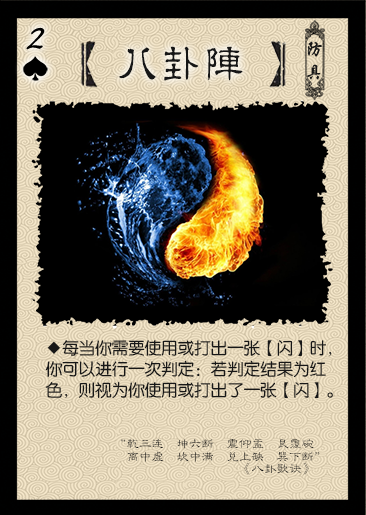
<style>
.page{position:relative;width:366px;height:515px;background:#000000}
.page>*{position:absolute;margin:0}
.t1{font:39.2px "Jxixinkai";letter-spacing:0.22em;color:#000000;font-weight:bold;font-style:italic}
.t2{font:41.7px "¾­µä·±½ÇÁ¥ Regular";letter-spacing:0.05em;color:#161616}
.t3{font:16.7px/20.9px "FZY3JW--GB1-0";letter-spacing:-0.01em;color:#171717}
.t4{font:12.5px/12.5px "FZLBJW--GB1-0";color:#171717}
</style>
<div class="page">
<p class="t1" style="left:26px;top:27px;width:19px;height:23px">2</p>
<p class="t2" style="left:119px;top:46px;width:124px;height:35px">八卦阵</p>
<p class="t3" style="left:45px;top:340px;width:288px;height:59px">◆每当你需要使用或打出一张【闪】时，<br>你可以进行一次判定：若判定结果为红<br>色，则视为你使用或打出了一张【闪】。</p>
<p class="t4" style="left:121px;top:438px;width:199px;height:37px;text-align:right">“乾三连　坤六断　震仰盂　艮覆碗　<br>离中虚　坎中满　兑上缺　巽下断”<br>                                      《八卦歌诀》</p>
</div>
